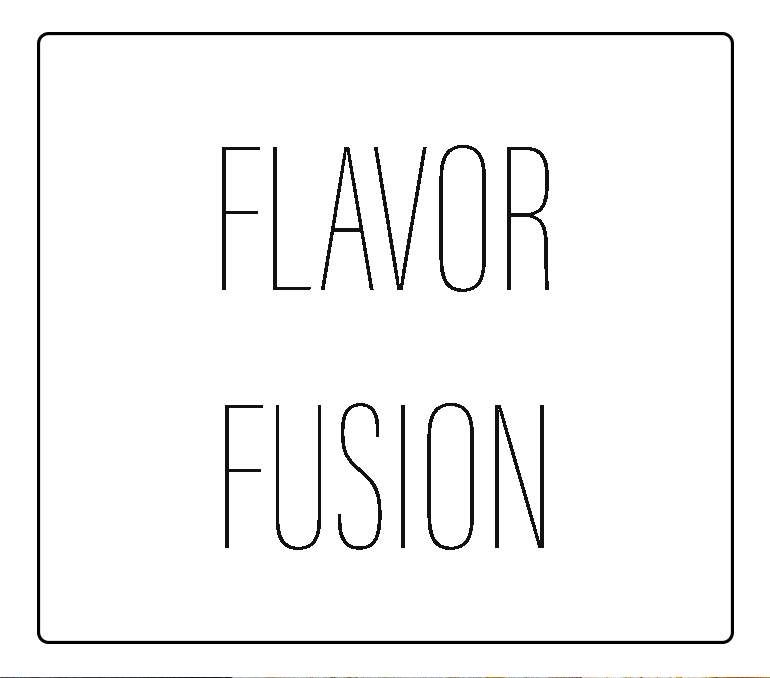
<style>
.page{position:relative;width:770px;height:678px;background:#ffffff}
.page>*{position:absolute;margin:0}
.t1{font:215.1px "AcuminConcept-ExtraCondensedThin";color:#121111}
</style>
<div class="page">
<p class="t1" style="left:222px;top:145px;width:327px;height:405px;text-align:center">FLAVOR<br>FUSION</p>
</div>
